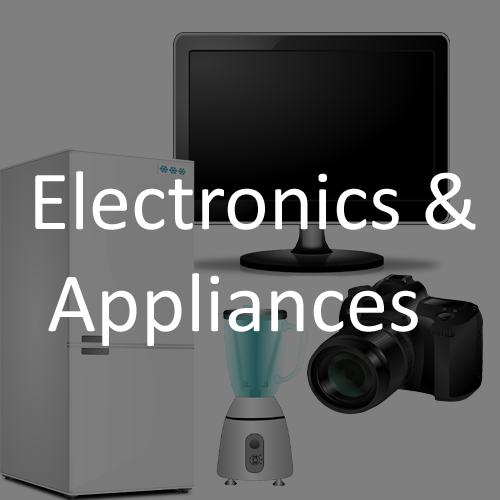
<style>
.page{position:relative;width:500px;height:500px;background:#7f7f7f}
.page>*{position:absolute;margin:0}
.t1{font:85px "Calibri";color:#ffffff}
</style>
<div class="page">
<p class="t1" style="left:35px;top:171px;width:441px;height:175px">Electronics &amp;<br> Appliances</p>
</div>
